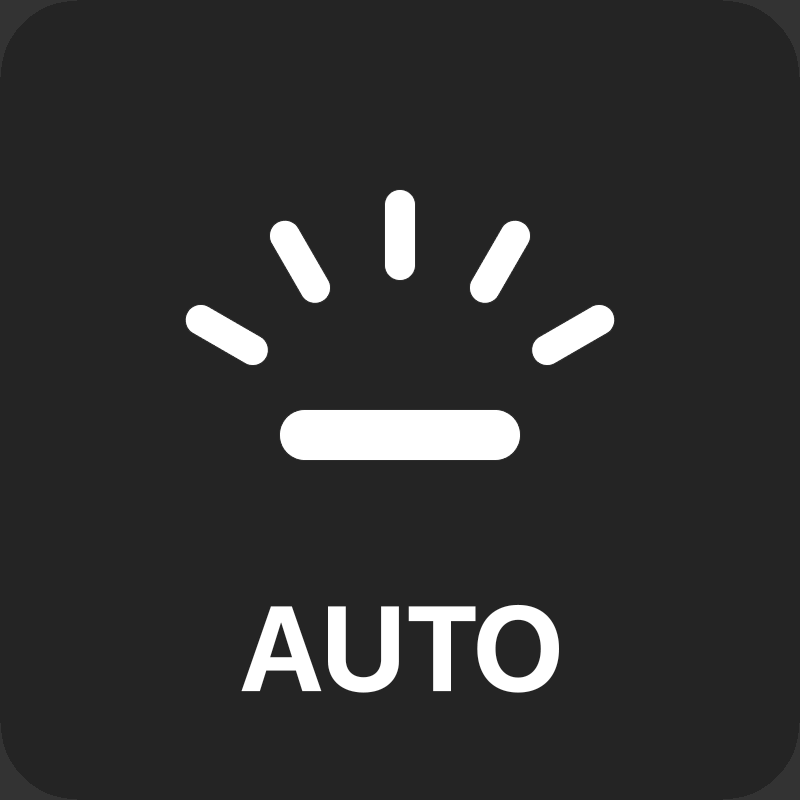
<style>
.page{position:relative;width:800px;height:800px;background:#242424}
.page>*{position:absolute;margin:0}
.t1{font:120px "SFProDisplay-Bold";color:#ffffff}
</style>
<div class="page">
<p class="t1" style="left:241px;top:604px;width:318px;height:89px">AUTO</p>
</div>
